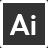
<style>
.page{position:relative;width:48px;height:48px;background:#333333}
.page>*{position:absolute;margin:0}
.t1{font:28px "CocoGothic-Bold";color:#ffffff}
</style>
<div class="page">
<p class="t1" style="left:9px;top:14px;width:27px;height:21px">Ai</p>
</div>
